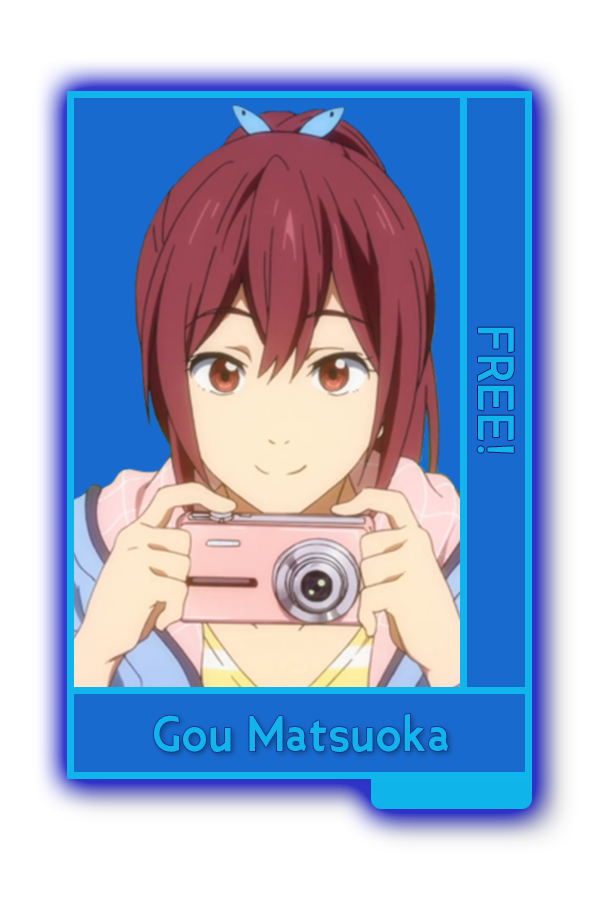
<style>
.page{position:relative;width:600px;height:900px;background:#ffffff}
.page>*{position:absolute;margin:0}
.t1{font:47.8px "Ancillary-Bold";color:#0fb5eb}
.t2{font:46.7px "Ancillary-Bold";color:#0fb5eb}
</style>
<div class="page">
<p class="t1" style="left:477px;top:327px;width:37px;height:126px;rotate:90deg">FREE!</p>
<p class="t2" style="left:154px;top:713px;width:294px;height:39px">Gou Matsuoka</p>
</div>
